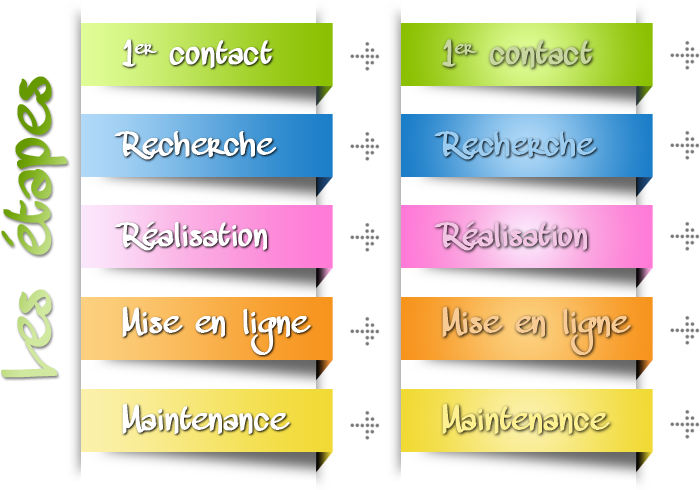
<style>
.page{position:relative;width:700px;height:490px;background:#ffffff}
.page>*{position:absolute;margin:0}
.t1{font:30px "MAWNSHandwriting";color:#ffffff;font-weight:bold}
.t2{font:30px "MAWNSHandwriting";color:#c7d79f;font-weight:bold}
.t3{font:60px "MAWNSHandwriting";font-weight:bold}
.t4{font:30px "MAWNSHandwriting";color:#9ccdf1;font-weight:bold}
.t5{font:30px "MAWNSHandwriting";color:#f3c5e5;font-weight:bold}
.t6{font:30px "MAWNSHandwriting";color:#f8cb95;font-weight:bold}
.t7{font:30px "MAWNSHandwriting";color:#fdf091;font-weight:bold}
</style>
<div class="page">
<p class="t1" style="left:122px;top:39px;width:151px;height:29px">1er contact</p>
<p class="t2" style="left:442px;top:39px;width:151px;height:29px">1er contact</p>
<p class="t3" style="left:1px;top:76px;width:67px;height:302px;rotate:-90deg">Les étapes</p>
<p class="t1" style="left:114px;top:131px;width:163px;height:29px">Recherche</p>
<p class="t4" style="left:434px;top:131px;width:163px;height:29px">Recherche</p>
<p class="t1" style="left:114px;top:221px;width:153px;height:30px">Réalisation</p>
<p class="t5" style="left:434px;top:221px;width:153px;height:30px">Réalisation</p>
<p class="t1" style="left:122px;top:306px;width:189px;height:49px">Mise en ligne</p>
<p class="t6" style="left:442px;top:306px;width:189px;height:49px">Mise en ligne</p>
<p class="t1" style="left:122px;top:403px;width:168px;height:31px">Maintenance</p>
<p class="t7" style="left:442px;top:403px;width:168px;height:31px">Maintenance</p>
</div>
